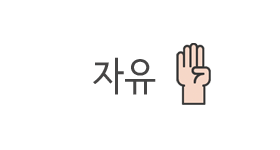
<style>
.page{position:relative;width:280px;height:150px;background:#ffffff}
.page>*{position:absolute;margin:0}
.t1{font:40px "SeN-CM";color:#464545}
</style>
<div class="page">
<p class="t1" style="left:93px;top:57px;width:63px;height:38px">자유</p>
</div>
